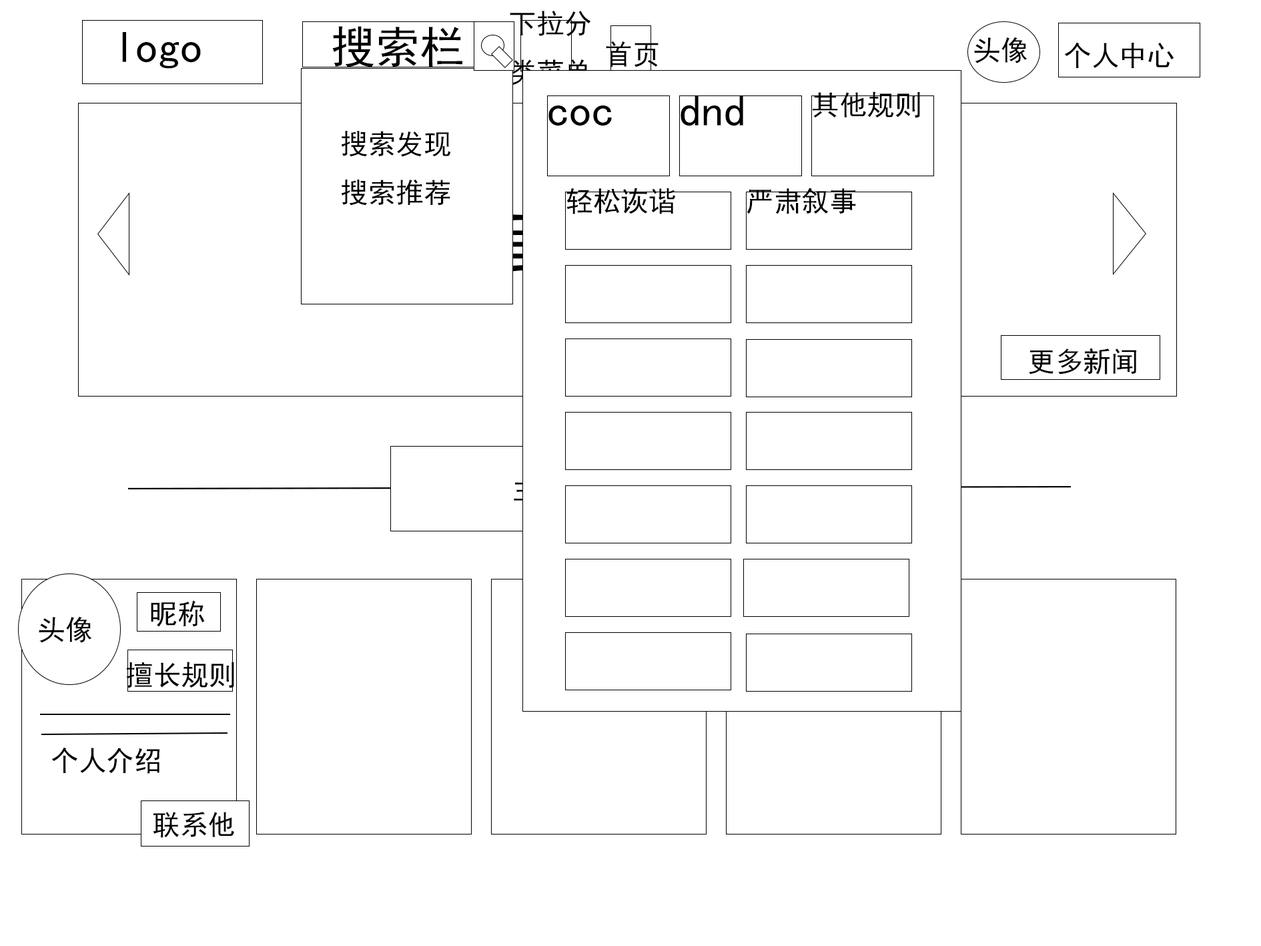
<style>
.page{position:relative;width:1261px;height:946px;background:#ffffff}
.page>*{position:absolute;margin:0}
.t1{font:27.8px "SimHei";color:#000000}
.t2{font:44.5px "SimHei";color:#000000}
</style>
<div class="page">
<p class="t1" style="left:510px;top:11px;width:81px;height:74px">下拉分<br>类菜单</p>
<p class="t2" style="left:332px;top:26px;width:130px;height:41px">搜索栏</p>
<p class="t2" style="left:122px;top:32px;width:79px;height:37px">logo</p>
<p class="t1" style="left:606px;top:41px;width:53px;height:26px">首页</p>
<p class="t1" style="left:974px;top:37px;width:54px;height:26px">头像</p>
<p class="t1" style="left:1064px;top:42px;width:110px;height:26px">个人中心</p>
<p class="t2" style="left:681px;top:95px;width:62px;height:31px">dnd</p>
<p class="t1" style="left:813px;top:91px;width:107px;height:27px">其他规则</p>
<p class="t2" style="left:548px;top:105px;width:64px;height:21px">coc</p>
<p class="t1" style="left:341px;top:131px;width:110px;height:75px">搜索发现<br>搜索推荐</p>
<p class="t1" style="left:567px;top:188px;width:108px;height:26px">轻松诙谐</p>
<p class="t1" style="left:747px;top:188px;width:109px;height:26px">严肃叙事</p>
<p class="t1" style="left:1029px;top:348px;width:107px;height:26px">更多新闻</p>
<p class="t1" style="left:151px;top:600px;width:54px;height:27px">昵称</p>
<p class="t1" style="left:39px;top:616px;width:53px;height:27px">头像</p>
<p class="t1" style="left:126px;top:661px;width:108px;height:27px">擅长规则</p>
<p class="t1" style="left:51px;top:747px;width:109px;height:26px">个人介绍</p>
<p class="t1" style="left:153px;top:811px;width:81px;height:26px">联系他</p>
</div>
